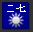
<style>
.page{position:relative;width:33px;height:32px;background:#000090}
.page>*{position:absolute;margin:0}
.t1{font:10.4px "SimSun";color:#ffffff}
</style>
<div class="page">
<p class="t1" style="left:7px;top:4px;width:19px;height:8px">二七</p>
</div>
